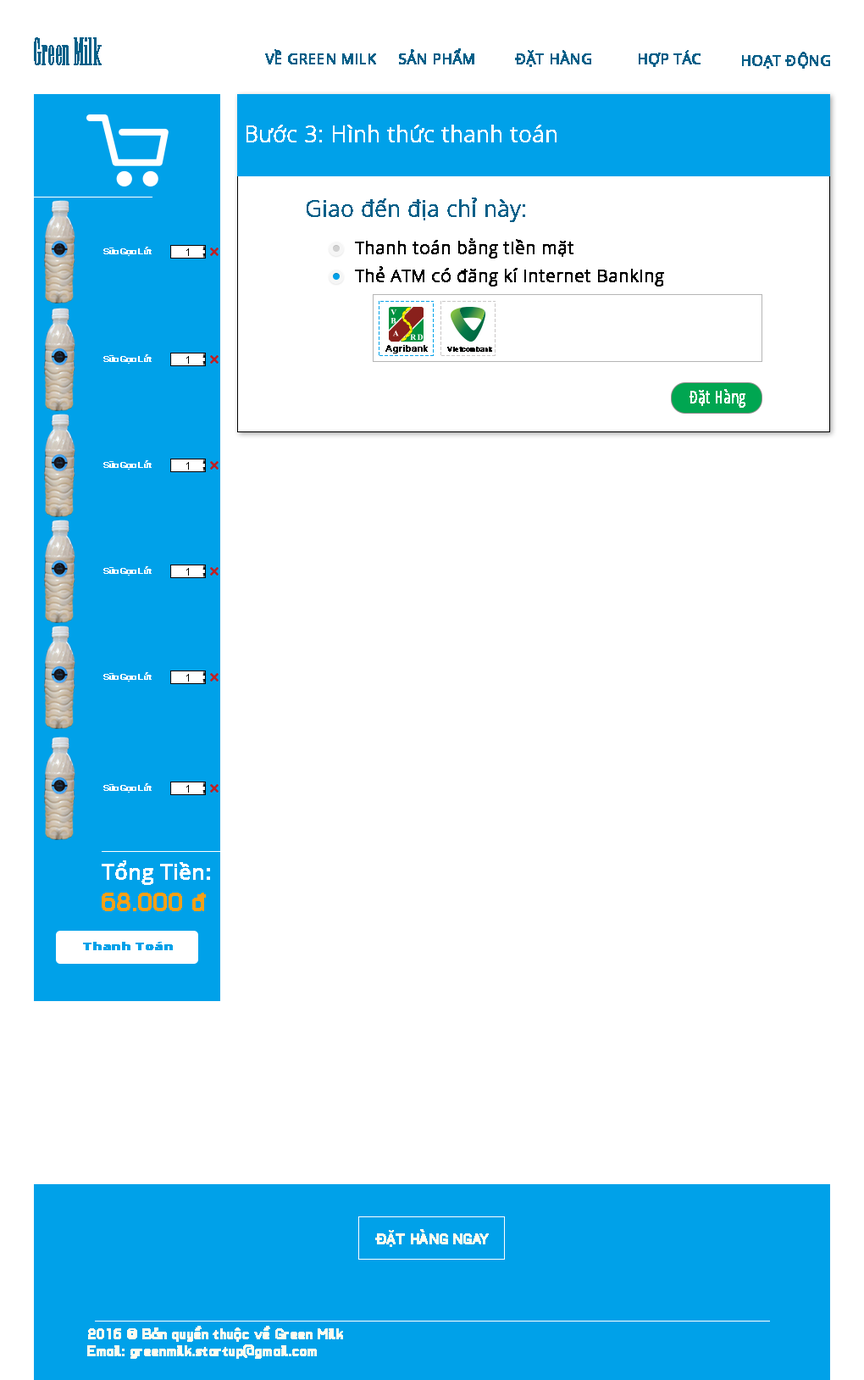
<style>
.page{position:relative;width:864px;height:1380px;background:#ffffff}
.page>*{position:absolute;margin:0}
.t1{font:36.1px "Onyx";color:#045f88;font-weight:bold;scale:0.67 1}
.t2{font:14.5px "OpenSans";color:#045f88;font-weight:bold}
.t3{font:22px "OpenSans-Light";color:#ffffff;font-weight:bold}
.t4{font:22px "OpenSans-Light";color:#045f88;font-weight:bold}
.t5{font:16.9px "OpenSans-Light";color:#010101;font-weight:bold}
.t6{font:8.7px "TUVTypomoderno";color:#ffffff;font-weight:bold}
.t7{font:10.2px "OpenSans";color:#000000;scale:0.91 1}
.t8{font:9.3px "ArialMT";color:#000000;font-weight:bold}
.t9{font:6.8px "ArialMT";color:#000000;font-weight:bold}
.t10{font:16.9px "OpenSans-CondensedLight";color:#ffffff;font-weight:bold}
.t11{font:20.9px "OpenSans";color:#ffffff;font-weight:bold}
.t12{font:25.4px "TUVTypomoderno";color:#f6a018;font-weight:bold}
.t13{font:11px "OpenSans-Extrabold";color:#00a1e9;font-weight:bold;scale:1.2 1}
.t14{font:14.5px "TUVTypomoderno";color:#fffbf0;font-weight:bold}
</style>
<div class="page">
<p class="t1" style="left:34px;top:37px;width:68px;height:28px">Green Milk</p>
<p class="t2" style="left:265px;top:49px;width:111px;height:15px">VỀ GREEN MILK</p>
<p class="t2" style="left:399px;top:48px;width:76px;height:16px">SẢN PHẨM</p>
<p class="t2" style="left:515px;top:50px;width:76px;height:17px">ĐẶT HÀNG</p>
<p class="t2" style="left:639px;top:50px;width:62px;height:17px">HỢP TÁC</p>
<p class="t2" style="left:742px;top:52px;width:88px;height:17px">HOẠT ĐỘNG</p>
<p class="t3" style="left:247px;top:125px;width:310px;height:17px">Bước 3: Hình thức thanh toán</p>
<p class="t4" style="left:307px;top:197px;width:218px;height:25px">Giao đến địa chỉ này:</p>
<p class="t5" style="left:355px;top:238px;width:219px;height:20px">Thanh toán bằng tiền mặt</p>
<p class="t6" style="left:103px;top:247px;width:49px;height:9px">Sữa Gạo Lứt</p>
<p class="t7" style="left:186px;top:248px;width:3px;height:8px">1</p>
<p class="t5" style="left:355px;top:266px;width:309px;height:20px">Thẻ ATM có đăng kí Internet Banking</p>
<p class="t8" style="left:386px;top:345px;width:42px;height:8px">Agribank</p>
<p class="t9" style="left:447px;top:347px;width:45px;height:5px">Vietcombank</p>
<p class="t6" style="left:103px;top:354px;width:49px;height:10px">Sữa Gạo Lứt</p>
<p class="t7" style="left:186px;top:356px;width:3px;height:8px">1</p>
<p class="t10" style="left:690px;top:389px;width:56px;height:19px">Đặt Hàng</p>
<p class="t6" style="left:103px;top:460px;width:49px;height:9px">Sữa Gạo Lứt</p>
<p class="t7" style="left:186px;top:462px;width:3px;height:7px">1</p>
<p class="t6" style="left:103px;top:566px;width:49px;height:9px">Sữa Gạo Lứt</p>
<p class="t7" style="left:186px;top:568px;width:3px;height:7px">1</p>
<p class="t6" style="left:103px;top:672px;width:49px;height:9px">Sữa Gạo Lứt</p>
<p class="t7" style="left:186px;top:674px;width:3px;height:7px">1</p>
<p class="t6" style="left:103px;top:783px;width:49px;height:9px">Sữa Gạo Lứt</p>
<p class="t7" style="left:186px;top:785px;width:3px;height:7px">1</p>
<p class="t11" style="left:102px;top:860px;width:108px;height:25px">Tổng Tiền:</p>
<p class="t12" style="left:102px;top:892px;width:104px;height:19px">68.000 đ</p>
<p class="t13" style="left:83px;top:941px;width:90px;height:9px">Thanh Toán</p>
<p class="t14" style="left:375px;top:1229px;width:114px;height:18px">ĐẶT HÀNG NGAY</p>
<p class="t14" style="left:87px;top:1325px;width:256px;height:33px">2016 © Bản quyền thuộc về Green Milk<br>Email: greenmilk.startup@gmail.com</p>
</div>
